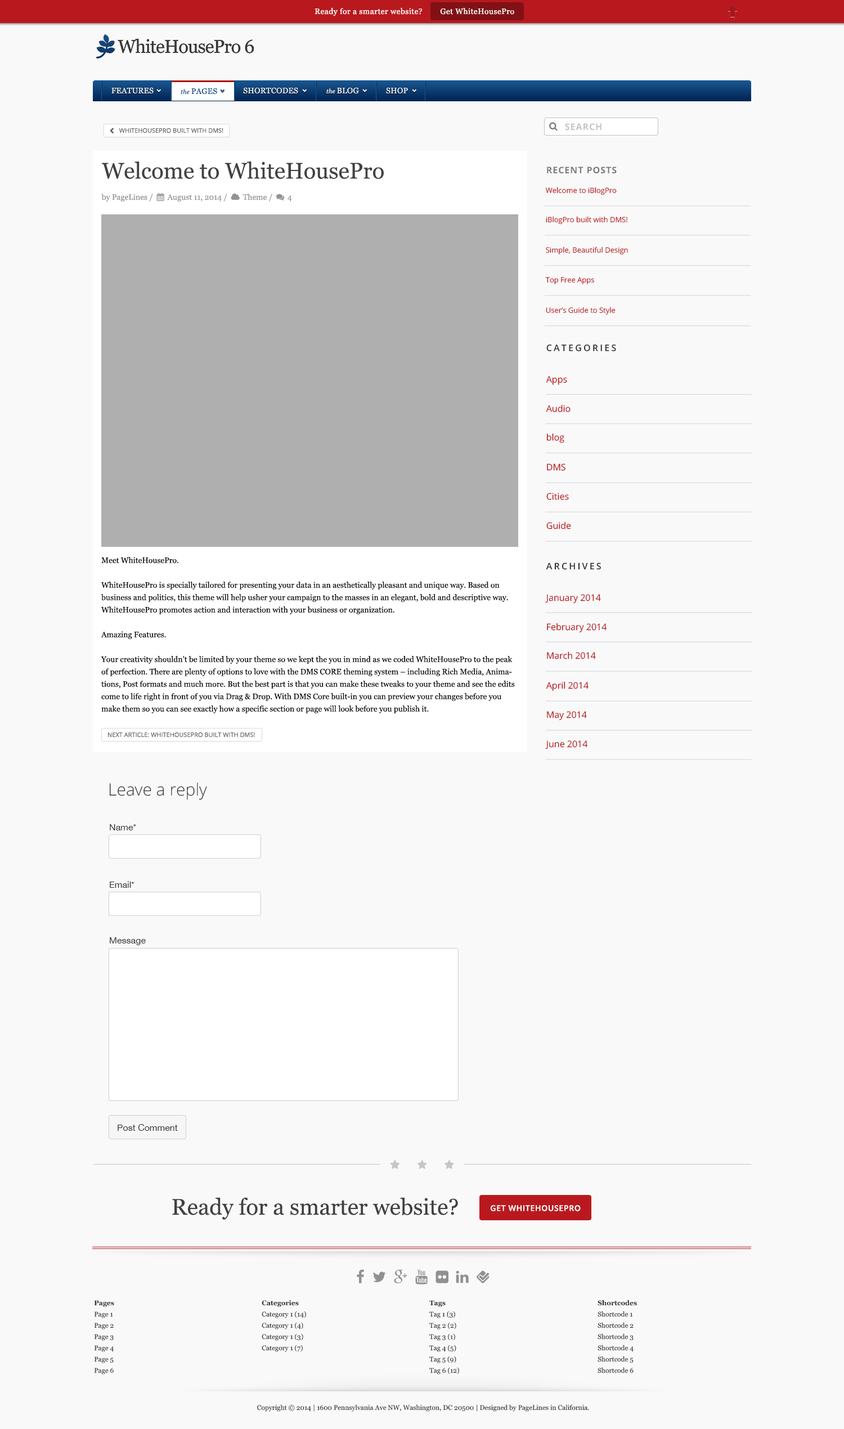
<style>
.page{position:relative;width:844px;height:1429px;background:#f9f9f9}
.page>*{position:absolute;margin:0}
.t1{font:7.9px "Georgia";letter-spacing:0.033em;color:#ffffff}
.t2{font:7.9px "Georgia";letter-spacing:0.02em;color:#ededed;text-transform:uppercase}
.t3{font:6.2px "Georgia-Italic";letter-spacing:0.02em;color:#ededed}
.t4{font:7.9px "Georgia";letter-spacing:0.02em;color:#0f4f89;text-transform:uppercase}
.t5{font:6.2px "Georgia-Italic";letter-spacing:0.02em;color:#0f4f89}
.t6{font:9px "OpenSans-Bold";letter-spacing:0.06em;color:#c4c4c4;text-transform:uppercase}
.t7{font:6.2px "OpenSans";color:#636363;text-transform:uppercase}
.t8{font:22.5px "Georgia";color:#414141}
.t9{font:9px "OpenSans-Bold";letter-spacing:0.06em;color:#7c7c7b;text-transform:uppercase}
.t10{font:7.3px "OpenSans";color:#b9191e}
.t11{font:9px "OpenSans-Semibold";letter-spacing:0.2em;color:#333333;text-transform:uppercase}
.t12{font:9px "OpenSans";color:#b9191e}
.t13{font:7.9px/12.4px "Georgia";color:#000000}
.t14{font:16.9px "OpenSans-Light";color:#333333}
.t15{font:9px "HelveticaNeue";color:#333333}
.t16{font:7.9px "OpenSans-Semibold";letter-spacing:0.05em;color:#ffffff;text-transform:uppercase}
.t17{font:6.7px/11.2px "Georgia";color:#333333}
.t18{font:6.7px/11.2px "Georgia-Bold";color:#333333}
.t19{font:6.7px "Georgia";color:#333333}
</style>
<div class="page">
<p class="t1" style="left:314px;top:8px;width:108px;height:8px">Ready for a smarter website?</p>
<p class="t1" style="left:440px;top:8px;width:74px;height:7px">Get WhiteHousePro</p>
<p class="t2" style="left:111px;top:87px;width:297px;height:7px">Features     <span class="t3">the </span>PAGES      Shortcodes       <span class="t3">the </span>Blog        Shop</p>
<p class="t4" style="left:181px;top:88px;width:36px;height:7px"><span class="t5">the </span>PAGES</p>
<p class="t6" style="left:565px;top:123px;width:36px;height:8px">Search</p>
<p class="t7" style="left:119px;top:128px;width:104px;height:5px">WhiteHousePro built With DMS!</p>
<p class="t8" style="left:102px;top:161px;width:282px;height:18px">Welcome to WhiteHousePro</p>
<p class="t9" style="left:547px;top:167px;width:70px;height:7px">Recent Posts</p>
<p class="t10" style="left:545px;top:187px;width:72px;height:8px">Welcome to iBlogPro</p>
<p class="t10" style="left:546px;top:216px;width:81px;height:8px">iBlogPro built with DMS!</p>
<p class="t10" style="left:546px;top:246px;width:82px;height:9px">Simple, Beautiful Design</p>
<p class="t10" style="left:545px;top:277px;width:49px;height:8px">Top Free Apps</p>
<p class="t10" style="left:546px;top:307px;width:69px;height:8px">User’s Guide to Style</p>
<p class="t11" style="left:546px;top:344px;width:70px;height:8px">Categories</p>
<p class="t12" style="left:546px;top:376px;width:21px;height:9px">Apps</p>
<p class="t12" style="left:546px;top:404px;width:24px;height:8px">Audio</p>
<p class="t12" style="left:546px;top:433px;width:18px;height:10px">blog</p>
<p class="t12" style="left:547px;top:464px;width:18px;height:7px">DMS</p>
<p class="t12" style="left:546px;top:493px;width:23px;height:7px">Cities</p>
<p class="t12" style="left:546px;top:522px;width:25px;height:7px">Guide</p>
<p class="t13" style="left:101px;top:557px;width:414px;height:156px">Meet WhiteHousePro.<br><br>WhiteHousePro is specially tailored for presenting your data in an aesthetically pleasant and unique way. Based on business and politics, this theme will help usher your campaign to the masses in an elegant, bold and descriptive way. WhiteHousePro promotes action and interaction with your business or organization.<br><br>Amazing Features.<br><br>Your creativity shouldn’t be limited by your theme so we kept the you in mind as we coded WhiteHousePro to the peak of perfection. There are plenty of options to love with the DMS CORE theming system – including Rich Media, Animations, Post formats and much more. But the best part is that you can make these tweaks to your theme and see the edits come to life right in front of you via Drag &amp; Drop. With DMS Core built-in you can preview your changes before you make them so you can see exactly how a specific section or page will look before you publish it.</p>
<p class="t11" style="left:546px;top:563px;width:55px;height:7px">Archives</p>
<p class="t12" style="left:545px;top:594px;width:56px;height:9px">January 2014</p>
<p class="t12" style="left:547px;top:623px;width:60px;height:9px">February 2014</p>
<p class="t12" style="left:547px;top:651px;width:49px;height:8px">March 2014</p>
<p class="t12" style="left:546px;top:681px;width:42px;height:10px">April 2014</p>
<p class="t12" style="left:547px;top:711px;width:40px;height:9px">May 2014</p>
<p class="t7" style="left:108px;top:732px;width:147px;height:6px">Next article: whitehousepro built with DMS!</p>
<p class="t12" style="left:545px;top:740px;width:43px;height:9px">June 2014</p>
<p class="t14" style="left:109px;top:783px;width:98px;height:17px">Leave a reply</p>
<p class="t15" style="left:110px;top:824px;width:26px;height:6px">Name*</p>
<p class="t15" style="left:110px;top:881px;width:24px;height:7px">Email*</p>
<p class="t15" style="left:110px;top:937px;width:36px;height:8px">Message</p>
<p class="t15" style="left:118px;top:1124px;width:60px;height:7px">Post Comment</p>
<p class="t8" style="left:172px;top:1197px;width:286px;height:23px">Ready for a smarter website?</p>
<p class="t16" style="left:491px;top:1205px;width:90px;height:6px">Get WhiteHousePro</p>
<p class="t17" style="left:94px;top:1300px;width:20px;height:74px"><span class="t18">Pages<br></span>Page 1<br>Page 2<br>Page 3<br>Page 4<br>Page 5<br>Page 6</p>
<p class="t17" style="left:262px;top:1300px;width:44px;height:52px"><span class="t18">Categories<br></span>Category 1 (14)<br>Category 1 (4)<br>Category 1 (3)<br>Category 1 (7)</p>
<p class="t17" style="left:429px;top:1300px;width:30px;height:74px"><span class="t18">Tags<br></span>Tag 1 (3)<br>Tag 2 (2)<br>Tag 3 (1)<br>Tag 4 (5)<br>Tag 5 (9)<br>Tag 6 (12)</p>
<p class="t17" style="left:597px;top:1300px;width:40px;height:73px"><span class="t18">Shortcodes<br></span>Shortcode 1<br>Shortcode 2<br>Shortcode 3<br>Shortcode 4<br>Shortcode 5<br>Shortcode 6</p>
<p class="t19" style="left:257px;top:1404px;width:332px;height:7px">Copyright © 2014 | 1600 Pennsylvania Ave NW, Washington, DC 20500 | Designed by PageLines in California.</p>
</div>
